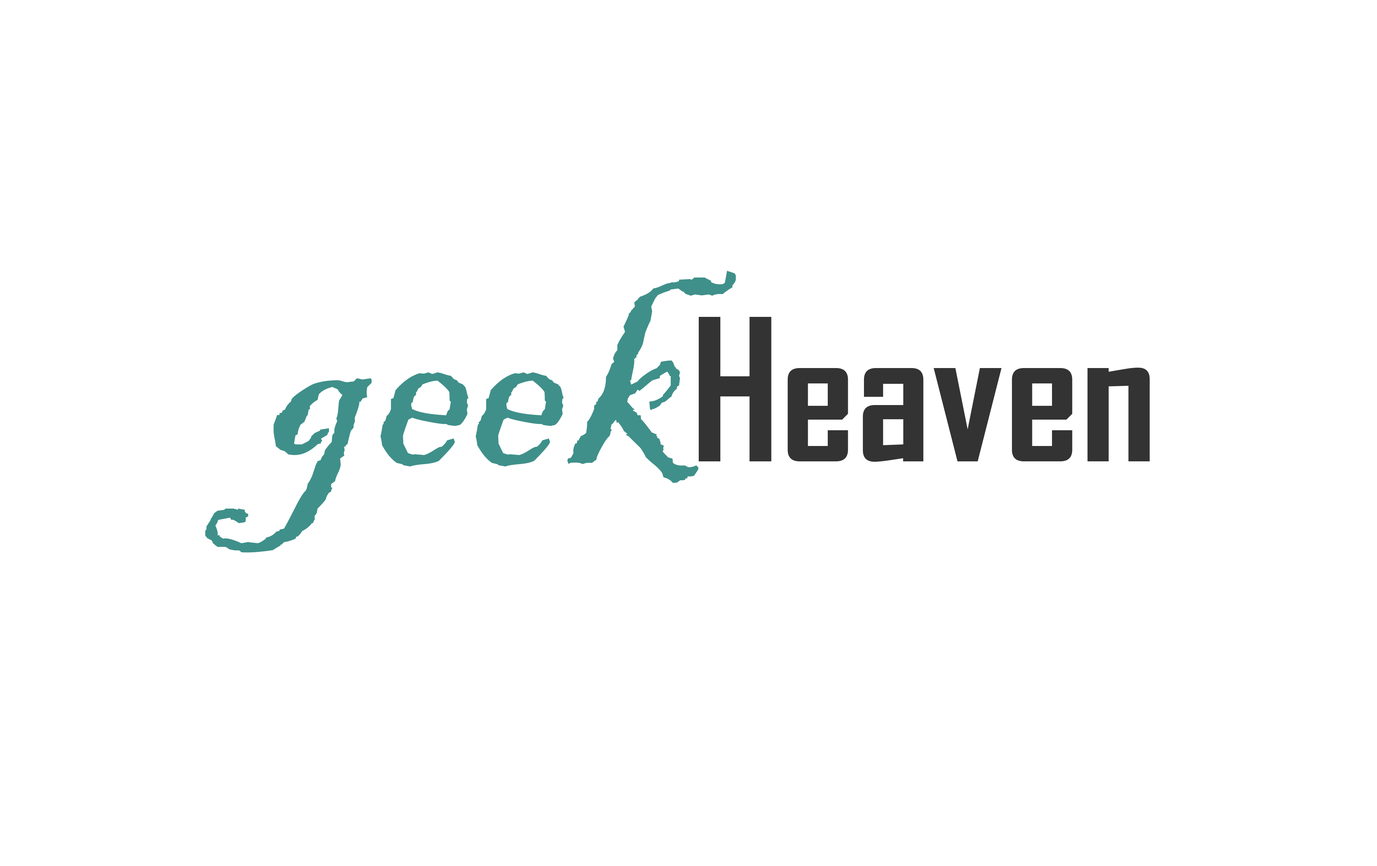
<style>
.page{position:relative;width:1377px;height:866px;background:#ffffff}
.page>*{position:absolute;margin:0}
.t1{font:189.1px "AgencyFB-Bold";color:#333333}
.t2{font:315.1px "BlackadderITC-Regular";color:#3f908a}
</style>
<div class="page">
<p class="t1" style="left:205px;top:271px;width:945px;height:282px"><span class="t2">geek</span>Heaven</p>
</div>
